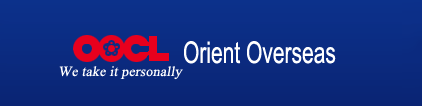
<style>
.page{position:relative;width:422px;height:106px}
.page>*{position:absolute;margin:0}
.t1{font:30px "ArialMT";color:#ffffff;scale:0.7 1}
.t2{font:14px "BasemicSymbol";letter-spacing:0.015em;color:#ffffff;font-style:italic}
</style>
<div class="page">
<p class="t1" style="left:184px;top:41px;width:152px;height:23px">Orient Overseas</p>
<p class="t2" style="left:59px;top:66px;width:124px;height:14px">We take it personally</p>
</div>
